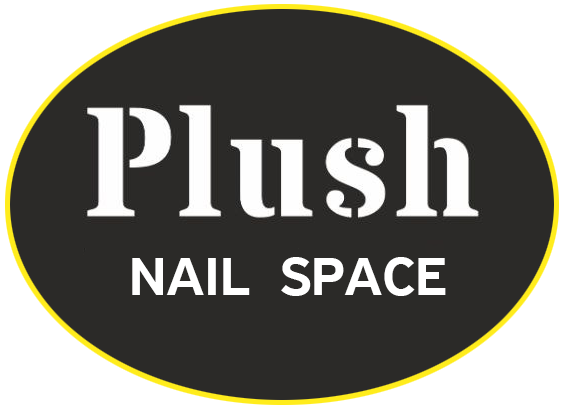
<style>
.page{position:relative;width:565px;height:411px;background:#2b2a28}
.page>*{position:absolute;margin:0}
.t1{font:56.8px "PFHighwaySansPro-Medium";color:#ffffff}
</style>
<div class="page">
<p class="t1" style="left:132px;top:257px;width:314px;height:39px">NAIL  SPACE</p>
</div>
